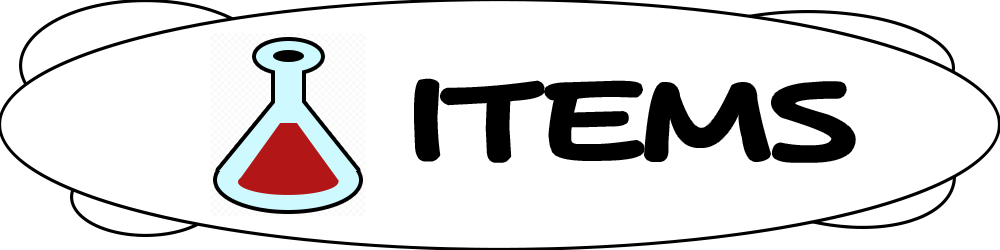
<style>
.page{position:relative;width:1000px;height:250px;background:#ffffff}
.page>*{position:absolute;margin:0}
.t1{font:72px "HeyGorgeous";color:#000000;scale:1.28 1}
</style>
<div class="page">
<p class="t1" style="left:415px;top:79px;width:440px;height:83px">ITEMS</p>
</div>
